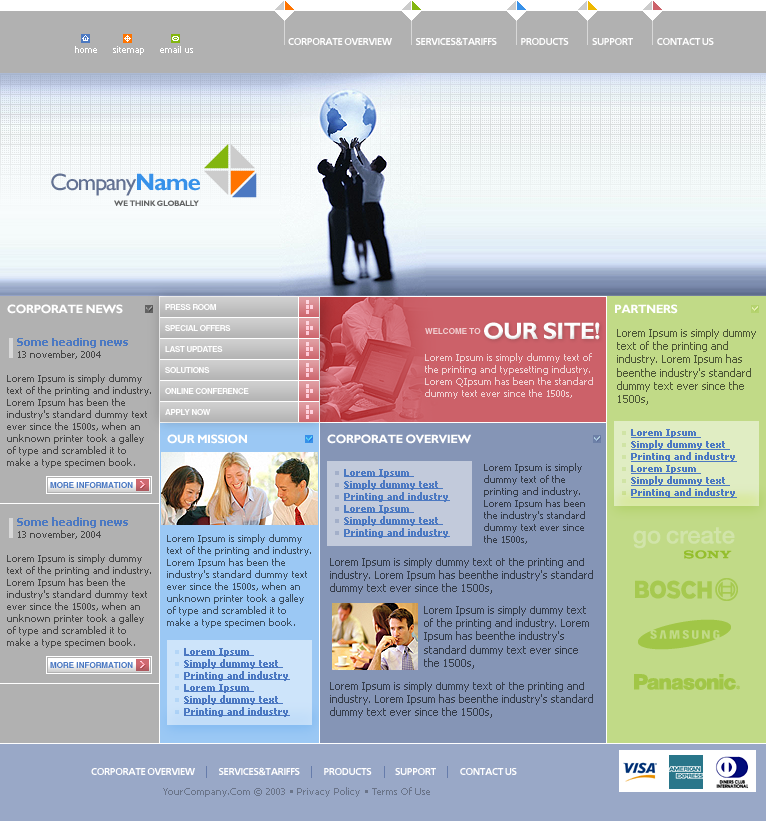
<style>
.page{position:relative;width:766px;height:821px}
.page>*{position:absolute;margin:0}
.t1{font:10px "FreeSetC-Bold";letter-spacing:-0.05em;color:#ffffff;text-transform:uppercase}
.t2{font:9px "Tahoma";color:#ffffff}
.t3{font:24px "GillSans-Normal";letter-spacing:-0.05em;color:#637293}
.t4{font:24px "GillSans-Bold";letter-spacing:-0.05em;color:#3791e9}
.t5{font:8px "GillSans-Bold";letter-spacing:-0.05em;color:#636465;text-transform:uppercase}
.t6{font:12px "GillSans-Bold";letter-spacing:-0.04em;color:#ffffff;text-transform:uppercase}
.t7{font:8px/21px "Helios-Bold";letter-spacing:-0.04em;color:#ffffff;text-transform:uppercase}
.t8{font:8px "Helios-Bold";color:#f0d0d2;text-transform:uppercase}
.t9{font:24px "GillSans-Bold";letter-spacing:-0.04em;color:#ffffff;text-transform:uppercase}
.t10{font:11px "Tahoma";color:#4d5736}
.t11{font:11px "Tahoma-Bold";color:#4c79c2}
.t12{font:10px "Tahoma";color:#474747}
.t13{font:10px "Tahoma";color:#f0d0d2}
.t14{font:10px/12px "Tahoma-Bold";color:#4c79c2;text-decoration:underline}
.t15{font:10px "Tahoma";color:#353c49}
.t16{font:8px "Helios-Bold";color:#4c79c2;text-transform:uppercase}
.t17{font:10px "Tahoma";color:#3e5062}
.t18{font:11px "Tahoma";color:#353c49}
.t19{font:10px "Tahoma";color:#6a7489}
</style>
<div class="page">
<p class="t1" style="left:288px;top:37px;width:426px;height:9px">corporate overview             services&amp;tariffs             products             support             contact us</p>
<p class="t2" style="left:75px;top:46px;width:118px;height:9px">home     sitemap     email us</p>
<p class="t3" style="left:51px;top:173px;width:149px;height:23px">Company<span class="t4">Name</span></p>
<p class="t5" style="left:114px;top:200px;width:85px;height:6px">We think globally</p>
<p class="t6" style="left:7px;top:304px;width:116px;height:10px">corporate news</p>
<p class="t7" style="left:165px;top:304px;width:84px;height:111px">press room<br>special offers<br>last updates<br>solutions<br>online conference<br>apply now</p>
<p class="t6" style="left:615px;top:304px;width:63px;height:10px">partners</p>
<p class="t8" style="left:425px;top:328px;width:56px;height:6px">welcome to</p>
<p class="t9" style="left:484px;top:322px;width:116px;height:18px">our site!</p>
<p class="t10" style="left:617px;top:329px;width:139px;height:76px">Lorem Ipsum is simply dummy <br>text of the printing and <br>industry. Lorem Ipsum has <br>beenthe industry's standard <br>dummy text ever since the <br>1500s,</p>
<p class="t11" style="left:17px;top:338px;width:111px;height:21px">Some heading news<br><span class="t12">13 november, 2004</span></p>
<p class="t13" style="left:425px;top:353px;width:168px;height:46px">Lorem Ipsum is simply dummy text of <br>the printing and typesetting industry. <br>Lorem QIpsum has been the standard <br>dummy text ever since the 1500s,</p>
<p class="t12" style="left:7px;top:374px;width:144px;height:94px">Lorem Ipsum is simply dummy <br>text of the printing and industry. <br>Lorem Ipsum has been the <br>industry's standard dummy text <br>ever since the 1500s, when an <br>unknown printer took a galley <br>of type and scrambled it to <br>make a type specimen book.</p>
<p class="t6" style="left:167px;top:434px;width:80px;height:10px">our mission</p>
<p class="t6" style="left:327px;top:434px;width:145px;height:10px">corporate overview</p>
<p class="t14" style="left:631px;top:429px;width:106px;height:69px">Lorem Ipsum <br>Simply dummy text <br>Printing and industry<br>Lorem Ipsum <br>Simply dummy text <br>Printing and industry</p>
<p class="t14" style="left:344px;top:469px;width:106px;height:69px">Lorem Ipsum <br>Simply dummy text <br>Printing and industry<br>Lorem Ipsum <br>Simply dummy text <br>Printing and industry</p>
<p class="t15" style="left:484px;top:463px;width:101px;height:81px">Lorem Ipsum is simply <br>dummy text of the <br>printing and industry. <br>Lorem Ipsum has been<br>the industry's standard <br>dummy text ever since <br>the 1500s,</p>
<p class="t16" style="left:50px;top:482px;width:83px;height:6px">more information</p>
<p class="t11" style="left:17px;top:517px;width:111px;height:22px">Some heading news<br><span class="t12">13 november, 2004</span></p>
<p class="t17" style="left:167px;top:534px;width:144px;height:94px">Lorem Ipsum is simply dummy <br>text of the printing and industry. <br>Lorem Ipsum has been the <br>industry's standard dummy text <br>ever since the 1500s, when an <br>unknown printer took a galley <br>of type and scrambled it to <br>make a type specimen book.</p>
<p class="t12" style="left:7px;top:554px;width:144px;height:94px">Lorem Ipsum is simply dummy <br>text of the printing and industry. <br>Lorem Ipsum has been the <br>industry's standard dummy text <br>ever since the 1500s, when an <br>unknown printer took a galley <br>of type and scrambled it to <br>make a type specimen book.</p>
<p class="t18" style="left:330px;top:558px;width:263px;height:36px">Lorem Ipsum is simply dummy text of the printing and <br>industry. Lorem Ipsum has beenthe industry's standard <br>dummy text ever since the 1500s,</p>
<p class="t18" style="left:424px;top:606px;width:165px;height:63px">Lorem Ipsum is simply dummy text <br>of the printing and industry. Lorem <br>Ipsum has beenthe industry's <br>standard dummy text ever since <br>the 1500s,</p>
<p class="t14" style="left:184px;top:648px;width:106px;height:69px">Lorem Ipsum <br>Simply dummy text <br>Printing and industry<br>Lorem Ipsum <br>Simply dummy text <br>Printing and industry</p>
<p class="t16" style="left:50px;top:662px;width:83px;height:6px">more information</p>
<p class="t18" style="left:330px;top:682px;width:263px;height:36px">Lorem Ipsum is simply dummy text of the printing and <br>industry. Lorem Ipsum has beenthe industry's standard <br>dummy text ever since the 1500s,</p>
<p class="t1" style="left:91px;top:767px;width:426px;height:9px">corporate overview             services&amp;tariffs             products             support             contact us</p>
<p class="t19" style="left:163px;top:787px;width:267px;height:10px">YourCompany.Com © 2003 • Privacy Policy • Terms Of Use</p>
</div>
